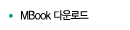
<style>
.page{position:relative;width:130px;height:30px;background:#ffffff}
.page>*{position:absolute;margin:0}
.t1{font:11px "YoonGothicL";letter-spacing:-0.05em;color:#000103;scale:0.9 1}
</style>
<div class="page">
<p class="t1" style="left:21px;top:10px;width:68px;height:11px">MBook 다운로드</p>
</div>
